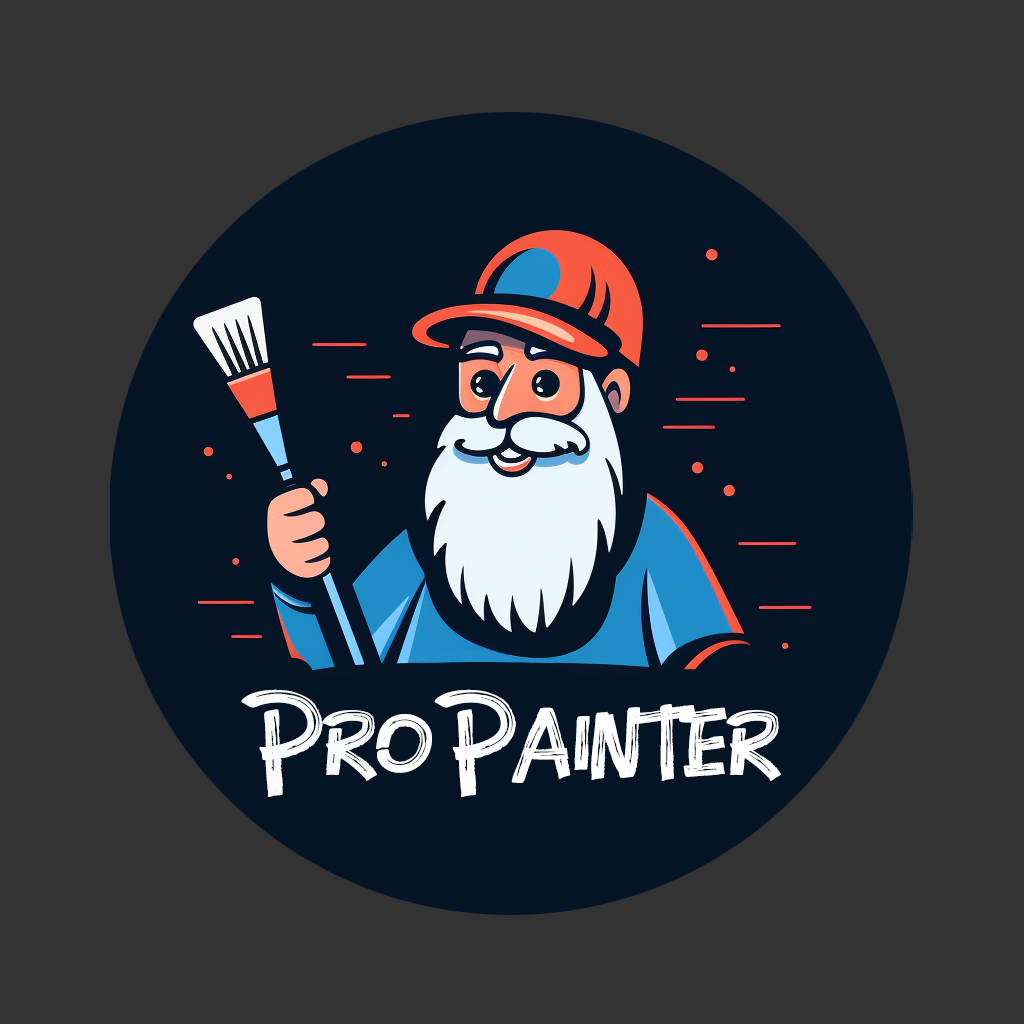
<style>
.page{position:relative;width:1024px;height:1024px;background:#333333}
.page>*{position:absolute;margin:0}
.t1{font:109.6px "BlinkStones";color:#ffffff;scale:1.11 1}
.t2{font:128.7px "BlinkStones";color:#f8fafa;scale:1.11 1}
.t3{font:109.6px "BlinkStones";color:#f8fafa;scale:1.11 1}
.t4{font:111.5px "BlinkStones";color:#ffffff;scale:1.11 1}
.t5{font:128.7px "BlinkStones";color:#ffffff;scale:1.11 1}
.t6{font:104.7px "BlinkStones";color:#ffffff;scale:1.11 1}
</style>
<div class="page">
<p class="t1" style="left:241px;top:689px;width:540px;height:108px"><span class="t2">P</span><span class="t3">r</span><span class="t4">o</span><span class="t5">P</span><span class="t6">a</span>in<span class="t6">t</span>er</p>
</div>
